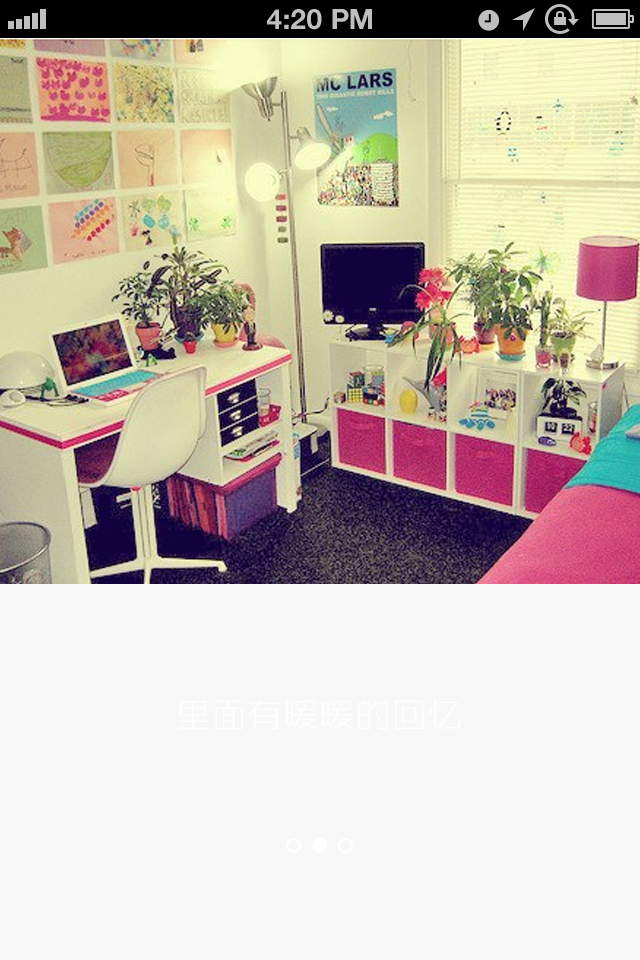
<style>
.page{position:relative;width:640px;height:960px;background:#f8f8f8}
.page>*{position:absolute;margin:0}
.t1{font:28px "HelveticaNeue-Bold";color:#bfbfbf;text-transform:uppercase}
.t2{font:36px "ZHSRXT--GBK1-0";color:#ffffff}
</style>
<div class="page">
<p class="t1" style="left:267px;top:9px;width:105px;height:21px">4:20 PM</p>
<p class="t2" style="left:177px;top:699px;width:284px;height:31px">里面有暖暖的回忆</p>
</div>
